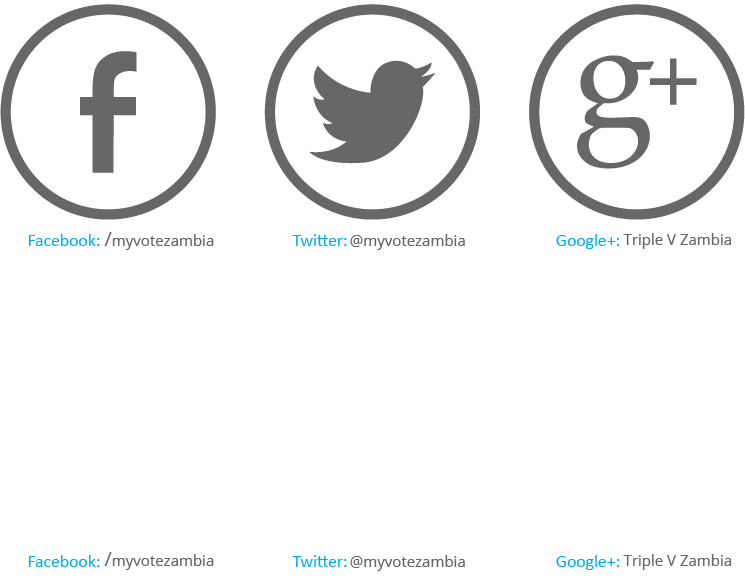
<style>
.page{position:relative;width:745px;height:582px;background:#ffffff}
.page>*{position:absolute;margin:0}
.t1{font:15px "OpenSans";color:#676767}
.t2{font:20px "OpenSans";color:#676767}
</style>
<div class="page">
<p class="t1" style="left:104px;top:232px;width:110px;height:18px"><span class="t2">/</span>myvotezambia</p>
<p class="t1" style="left:623px;top:233px;width:108px;height:16px">Triple V Zambia</p>
<p class="t1" style="left:350px;top:234px;width:115px;height:16px">@myvotezambia</p>
<p class="t1" style="left:104px;top:552px;width:110px;height:18px"><span class="t2">/</span>myvotezambia</p>
<p class="t1" style="left:350px;top:555px;width:115px;height:16px">@myvotezambia</p>
<p class="t1" style="left:623px;top:554px;width:108px;height:16px">Triple V Zambia</p>
</div>
